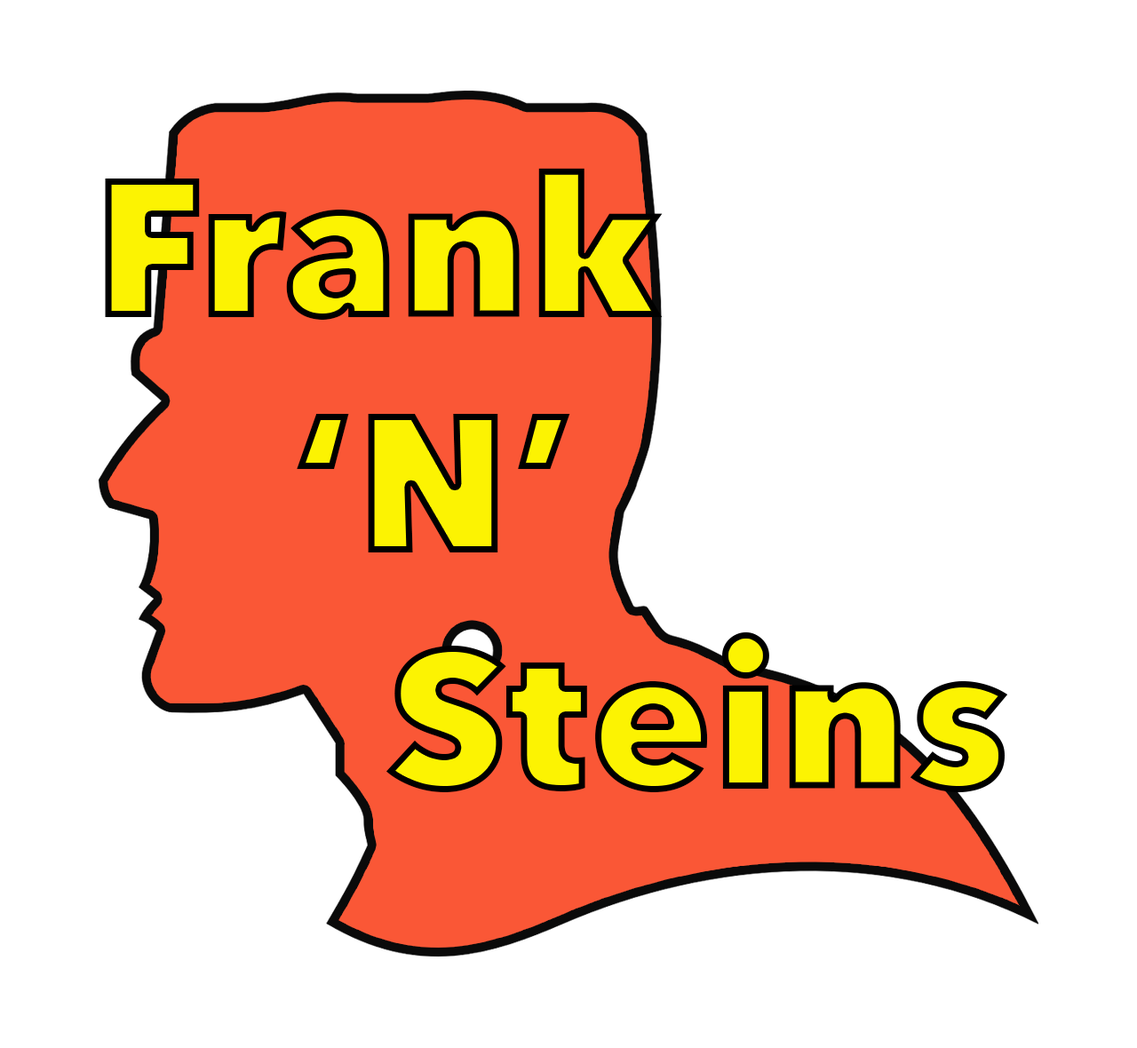
<style>
.page{position:relative;width:1137px;height:1048px;background:#ffffff}
.page>*{position:absolute;margin:0}
.t1{font:196.6px "AvenirNext-Heavy";color:#fcf302}
</style>
<div class="page">
<p class="t1" style="left:105px;top:168px;width:903px;height:625px">Frank <br>  ‘N’<br>   Steins</p>
</div>
